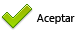
<style>
.page{position:relative;width:75px;height:33px;background:#ffffff}
.page>*{position:absolute;margin:0}
.t1{font:11px "SegoeUI";color:#000000}
</style>
<div class="page">
<p class="t1" style="left:36px;top:14px;width:39px;height:10px">Aceptar</p>
</div>
